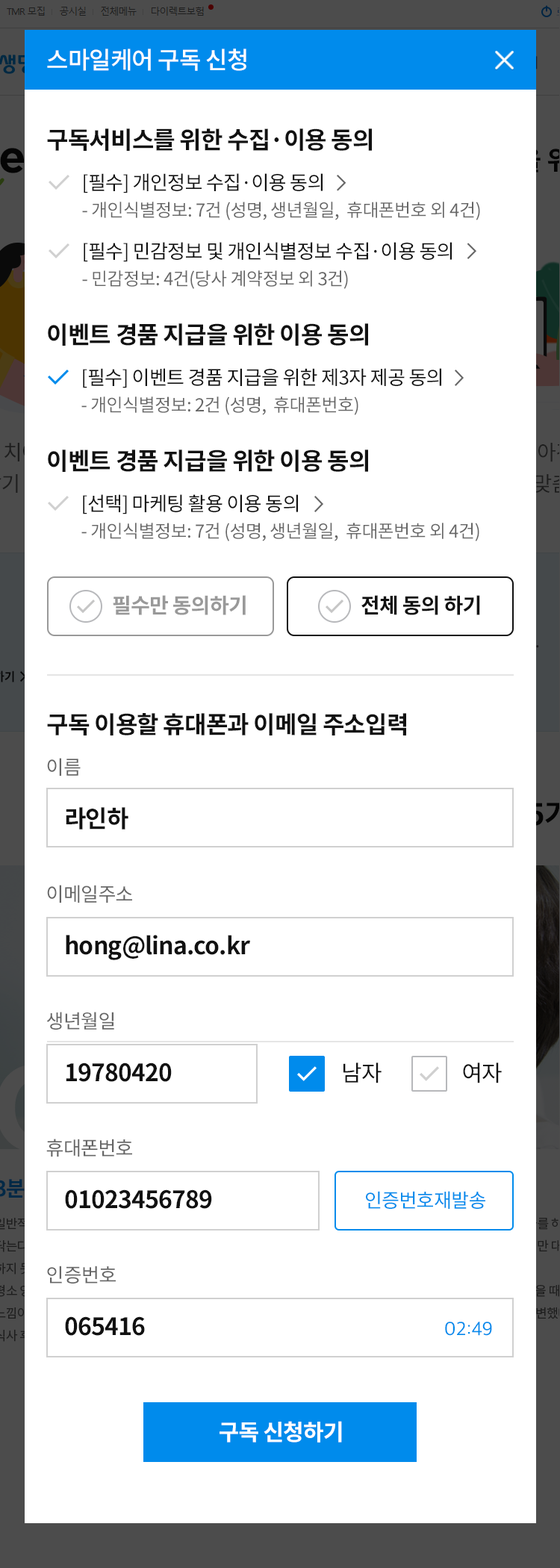
<style>
.page{position:relative;width:560px;height:1568px;background:#ffffff}
.page>*{position:absolute;margin:0}
.t1{font:23.9px "NotoSansCJKkr-Medium";letter-spacing:-0.025em;color:#ffffff}
.t2{font:23.9px "NotoSansCJKkr-Bold";letter-spacing:-0.025em;color:#111111}
.t3{font:17.9px/26.9px "NotoSansCJKkr-Regular";letter-spacing:-0.025em;color:#666666}
.t4{font:19.4px/41.8px "NotoSansCJKkr-Regular";letter-spacing:-0.025em;color:#111111}
.t5{font:20.9px "NotoSansCJKkr-Bold";letter-spacing:-0.025em;color:#999999}
.t6{font:20.9px "NotoSansCJKkr-Bold";letter-spacing:-0.025em;color:#111111}
.t7{font:19.4px/126.9px "NotoSansCJKkr-Regular";letter-spacing:-0.025em;color:#666666}
.t8{font:19.4px/126.9px "NotoSansCJKkr-Regular";letter-spacing:-0.01em;color:#666666}
.t9{font:23.9px/126.9px "NotoSansCJKkr-Bold";letter-spacing:-0.025em;color:#111111}
.t10{font:22.4px/126.9px "NotoSansCJKkr-Regular";letter-spacing:-0.025em;color:#111111}
.t11{font:19.4px "NotoSansCJKkr-Regular";letter-spacing:-0.025em;color:#008bec}
.t12{font:19.4px "AppleSDGothicNeoR00";letter-spacing:-0.01em;color:#008bec}
.t13{font:22.4px "NotoSansCJKkr-Bold";letter-spacing:-0.025em;color:#ffffff}
</style>
<div class="page">
<p class="t1" style="left:47px;top:49px;width:199px;height:22px">스마일케어 구독 신청</p>
<p class="t2" style="left:47px;top:128px;width:325px;height:23px">구독서비스를 위한 수집·이용 동의</p>
<p class="t3" style="left:82px;top:173px;width:398px;height:116px"><span class="t4">[필수] 개인정보 수집·이용 동의<br></span>- 개인식별정보: 7건 (성명, 생년월일,  휴대폰번호 외 4건)<br><span class="t4">[필수] 민감정보 및 개인식별정보 수집·이용 동의<br></span>- 민감정보: 4건(당사 계약정보 외 3건)</p>
<p class="t2" style="left:48px;top:323px;width:320px;height:23px">이벤트 경품 지급을 위한 이용 동의</p>
<p class="t4" style="left:81px;top:368px;width:360px;height:47px">[필수] 이벤트 경품 지급을 위한 제3자 제공 동의<br><span class="t3">- 개인식별정보: 2건 (성명,  휴대폰번호)</span></p>
<p class="t2" style="left:48px;top:449px;width:320px;height:23px">이벤트 경품 지급을 위한 이용 동의</p>
<p class="t3" style="left:81px;top:494px;width:398px;height:47px"><span class="t4">[선택] 마케팅 활용 이용 동의<br></span>- 개인식별정보: 7건 (성명, 생년월일,  휴대폰번호 외 4건)</p>
<p class="t5" style="left:113px;top:595px;width:133px;height:20px">필수만 동의하기</p>
<p class="t6" style="left:361px;top:595px;width:119px;height:20px">전체 동의 하기</p>
<p class="t2" style="left:47px;top:713px;width:359px;height:22px">구독 이용할 휴대폰과 이메일 주소입력</p>
<p class="t7" style="left:46px;top:758px;width:86px;height:526px">이름<br>이메일주소<br>생년월일<br>휴대폰번호<span class="t8"><br>인증번호</span></p>
<p class="t9" style="left:65px;top:807px;width:437px;height:529px">라인하<br>hong@lina.co.kr<br>19780420                                  <span class="t10">남자                  여자<br></span>01023456789<br>065416</p>
<p class="t11" style="left:366px;top:1191px;width:119px;height:18px">인증번호재발송</p>
<p class="t12" style="left:445px;top:1322px;width:47px;height:14px">02:49</p>
<p class="t13" style="left:220px;top:1421px;width:122px;height:22px">구독 신청하기</p>
</div>
